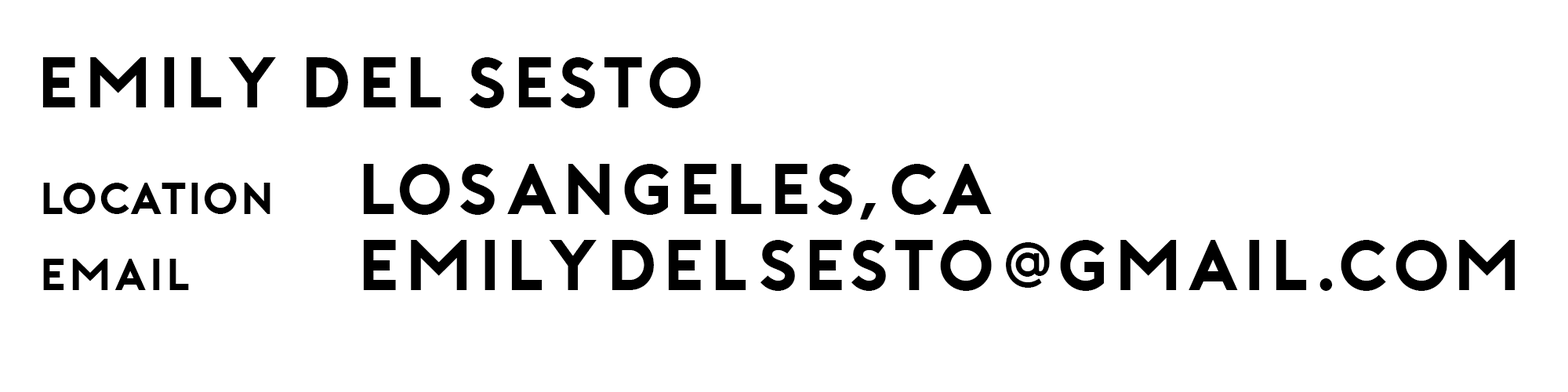
<style>
.page{position:relative;width:1568px;height:392px;background:#ffffff}
.page>*{position:absolute;margin:0}
.t1{font:71.3px/75.8px "Porter-BoldDEMO";letter-spacing:0.04em;color:#000000}
.t2{font:71.3px/80.2px "Porter-BoldDEMO";letter-spacing:0.04em;color:#000000}
.t3{font:44.6px/53.5px "Porter-BoldDEMO";color:#000000}
.t4{font:71.3px/53.5px "Porter-BoldDEMO";letter-spacing:0.04em;color:#000000}
.t5{font:44.6px/75.8px "Porter-BoldDEMO";letter-spacing:0.04em;color:#000000}
.t6{font:62.4px "Porter-BoldDEMO";letter-spacing:0.04em;color:#000000}
</style>
<div class="page">
<p class="t1" style="left:42px;top:57px;width:1473px;height:234px"><span class="t2">Emily Del SEstO<br><br></span><span class="t3">LOCATION      </span><span class="t4">Los ANGELES, CA<br></span><span class="t5">EMAIL         </span>EMILYDELSESTO   GMAIL.COM</p>
<p class="t6" style="left:1006px;top:242px;width:44px;height:46px">@</p>
</div>
